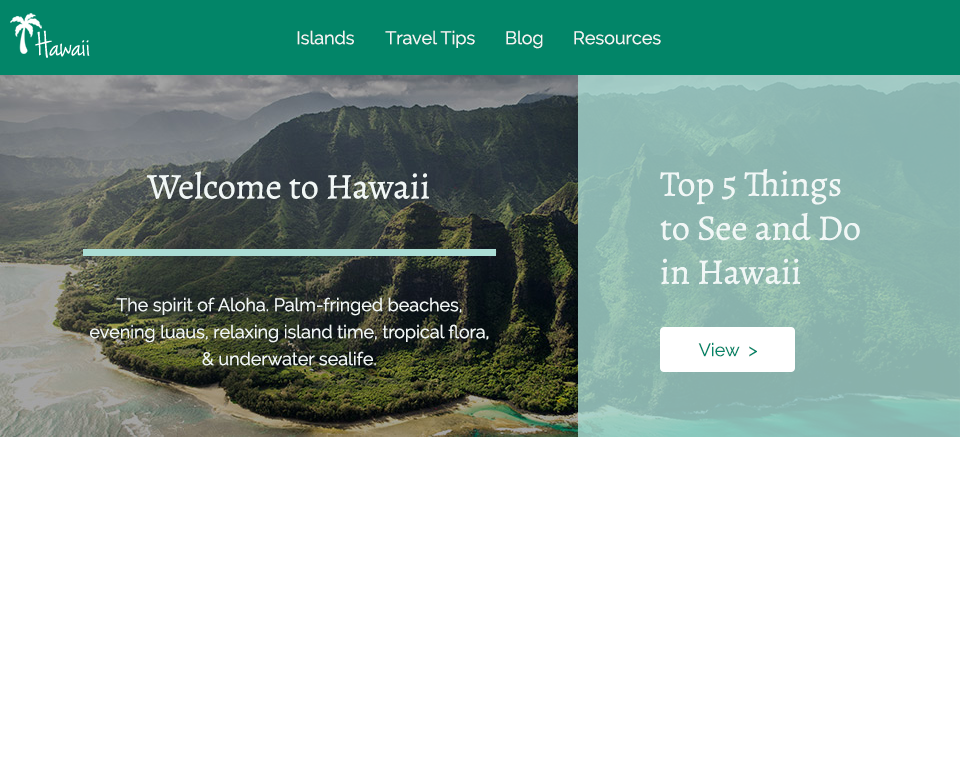
<style>
.page{position:relative;width:960px;height:768px;background:#ffffff}
.page>*{position:absolute;margin:0}
.t1{font:18px "Raleway";color:#f1f7f6}
.t2{font:36px "Alegreya-Regular";color:#f1f7f6}
.t3{font:36px/44px "Alegreya-Regular";color:#f1f7f6}
.t4{font:18px/27px "Raleway";color:#f1f7f6}
.t5{font:18px "Raleway";color:#028568}
</style>
<div class="page">
<p class="t1" style="left:297px;top:30px;width:57px;height:15px">Islands</p>
<p class="t1" style="left:385px;top:30px;width:90px;height:18px">Travel Tips</p>
<p class="t1" style="left:506px;top:30px;width:37px;height:19px">Blog</p>
<p class="t1" style="left:574px;top:31px;width:87px;height:14px">Resources</p>
<p class="t2" style="left:147px;top:171px;width:282px;height:28px">Welcome to Hawaii</p>
<p class="t3" style="left:660px;top:168px;width:200px;height:117px">Top 5 Things to See and Do in Hawaii</p>
<p class="t4" style="left:90px;top:297px;width:399px;height:69px;text-align:center">The spirit of Aloha. Palm-fringed beaches, evening luaus, relaxing island time, tropical flora, &amp; underwater sealife.</p>
<p class="t5" style="left:698px;top:342px;width:59px;height:15px">View  &gt;</p>
</div>
